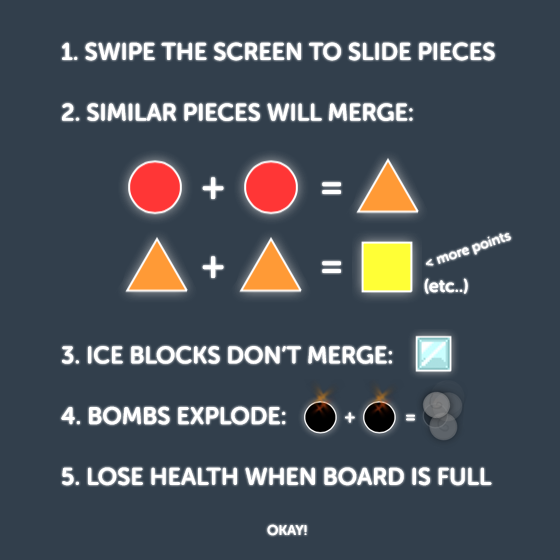
<style>
.page{position:relative;width:560px;height:560px;background:#323f4c}
.page>*{position:absolute;margin:0}
.t1{font:24px/30.3px "MuseoSansRounded-700";color:#ffffff}
.t2{font:38px "MuseoSansRounded-700";color:#ffffff}
.t3{font:18px "MuseoSansRounded-700";color:#ffffff}
.t4{font:14px "MuseoSansRounded-700";color:#ffffff}
</style>
<div class="page">
<p class="t1" style="left:61px;top:42px;width:434px;height:444px">1. SWIPE THE SCREEN TO SLIDE PIECES<br><br>2. SIMILAR PIECES WILL MERGE:<br><br><br><br><br><br><br><br>3. ICE BLOCKS DON’T MERGE:<br><br>4. BOMBS EXPLODE:<br><br>5. LOSE HEALTH WHEN BOARD IS FULL</p>
<p class="t2" style="left:202px;top:177px;width:139px;height:22px">+          =</p>
<p class="t2" style="left:202px;top:256px;width:139px;height:22px">+          =</p>
<p class="t3" style="left:424px;top:278px;width:44px;height:16px">(etc..)</p>
<p class="t3" style="left:345px;top:412px;width:70px;height:11px">+           =</p>
<p class="t4" style="left:267px;top:524px;width:40px;height:12px">OKAY!</p>
</div>
